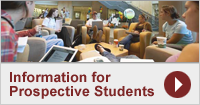
<style>
.page{position:relative;width:200px;height:105px;background:#ededed}
.page>*{position:absolute;margin:0}
.t1{font:14px/14px "Arial-BoldMT";letter-spacing:0.01em;color:#7d2626}
</style>
<div class="page">
<p class="t1" style="left:10px;top:71px;width:144px;height:28px">Information for<br>Prospective Students</p>
</div>
